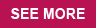
<style>
.page{position:relative;width:96px;height:28px;background:#b81252}
.page>*{position:absolute;margin:0}
.t1{font:14.6px "Arial-BoldMT";color:#ffffff}
</style>
<div class="page">
<p class="t1" style="left:11px;top:8px;width:74px;height:11px">SEE MORE</p>
</div>
